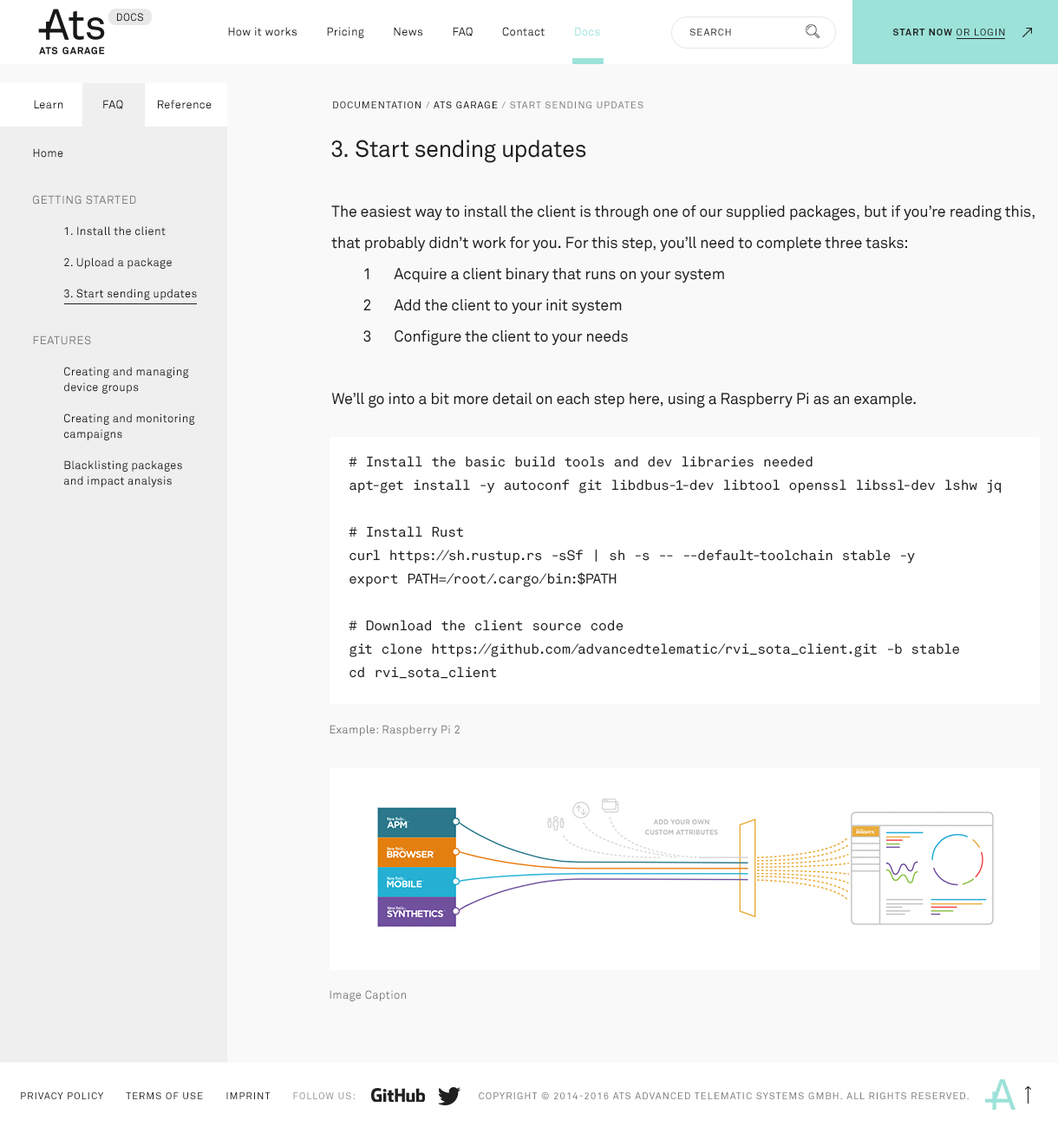
<style>
.page{position:relative;width:1058px;height:1127px;background:#f9f9f9}
.page>*{position:absolute;margin:0}
.t1{font:10.4px "AkkuratStd-Mono";letter-spacing:0.05em;color:#202020;text-transform:uppercase}
.t2{font:11.3px "AkkuratStd";letter-spacing:0.025em;color:#202020}
.t3{font:11.3px "AkkuratStd";letter-spacing:0.025em;color:#9ce2d8}
.t4{font:9.5px "AkkuratStd";letter-spacing:0.1em;color:#202020;text-transform:uppercase}
.t5{font:9.5px "AkkuratStd-Bold";letter-spacing:0.1em;color:#202020;text-transform:uppercase}
.t6{font:11.3px "AkkuratStd";letter-spacing:0.025em;color:#202020;text-transform:uppercase}
.t7{font:9.5px "AkkuratStd";letter-spacing:0.1em;color:#7b7b7b;text-transform:uppercase}
.t8{font:9.5px "AkkuratStd";letter-spacing:0.1em;color:#000000;text-transform:uppercase}
.t9{font:11.3px/15.6px "AkkuratStd";letter-spacing:0.025em;color:#202020}
.t10{font:11.3px/15.6px "AkkuratStd";letter-spacing:0.05em;color:#7b7b7b;text-transform:uppercase}
.t11{font:11.3px/15.6px "AkkuratStd";letter-spacing:0.025em;color:#161819}
.t12{font:23.4px "AkkuratStd";letter-spacing:-0.01em;color:#202020}
.t13{font:15.6px/31.2px "AkkuratStd";letter-spacing:-0.01em;color:#202020}
.t14{font:13.9px/23.4px "AkkuratStd-Mono";letter-spacing:-0.01em;color:#202020}
.t15{font:11.3px "AkkuratStd";letter-spacing:0.025em;color:#7b7b7b}
.t16{font:9.5px "AkkuratStd";letter-spacing:0.1em;color:#939393;text-transform:uppercase}
</style>
<div class="page">
<p class="t1" style="left:117px;top:13px;width:26px;height:9px">Docs</p>
<p class="t2" style="left:228px;top:27px;width:372px;height:11px">How it works          Pricing          News          FAQ          Contact          <span class="t3">Docs</span></p>
<p class="t4" style="left:689px;top:29px;width:42px;height:7px">search</p>
<p class="t5" style="left:892px;top:29px;width:113px;height:7px">Start now<span class="t4"> or login</span></p>
<p class="t2" style="left:34px;top:100px;width:29px;height:9px">Learn</p>
<p class="t6" style="left:103px;top:100px;width:20px;height:9px">faq</p>
<p class="t2" style="left:158px;top:100px;width:54px;height:9px">Reference</p>
<p class="t7" style="left:333px;top:101px;width:310px;height:7px"><span class="t4">Documentation</span> / <span class="t8">ATS Garage</span> / Start sending updates</p>
<p class="t9" style="left:33px;top:148px;width:164px;height:339px">Home<br><br><br><span class="t10">Getting Started<br></span><br> 1. Install the client<br><br> 2. Upload a package<br><br><span class="t11"> 3. Start sending updates<br><br><br></span><span class="t10">Features<br></span><br> Creating and managing <br> device groups<br><br> Creating and monitoring <br> campaigns<br><br> Blacklisting packages <br> and impact analysis</p>
<p class="t12" style="left:331px;top:140px;width:255px;height:23px">3. Start sending updates</p>
<p class="t13" style="left:331px;top:205px;width:703px;height:203px">The easiest way to install the client is through one of our supplied packages, but if you’re reading this, that probably didn’t work for you. For this step, you’ll need to complete three tasks:<br> 1 Acquire a client binary that runs on your system<br> 2 Add the client to your init system<br> 3 Configure the client to your needs<br><br>We’ll go into a bit more detail on each step here, using a Raspberry Pi as an example.</p>
<p class="t14" style="left:349px;top:456px;width:652px;height:223px"># Install the basic build tools and dev libraries needed<br>apt-get install -y autoconf git libdbus-1-dev libtool openssl libssl-dev lshw jq<br><br># Install Rust<br>curl https://sh.rustup.rs -sSf | sh -s -- --default-toolchain stable -y<br>export PATH=/root/.cargo/bin:$PATH<br><br># Download the client source code<br>git clone https://github.com/advancedtelematic/rvi_sota_client.git -b stable<br>cd rvi_sota_client</p>
<p class="t15" style="left:329px;top:725px;width:131px;height:11px">Example: Raspberry Pi 2</p>
<p class="t15" style="left:329px;top:990px;width:77px;height:11px">Image Caption</p>
<p class="t7" style="left:21px;top:1093px;width:948px;height:6px"><span class="t4">Privacy Policy       Terms of Use       imprint       </span><span class="t16">follow us:                                       </span>Copyright © 2014-2016 ATS Advanced telematic systems gmbh. All rights reserved.</p>
</div>
